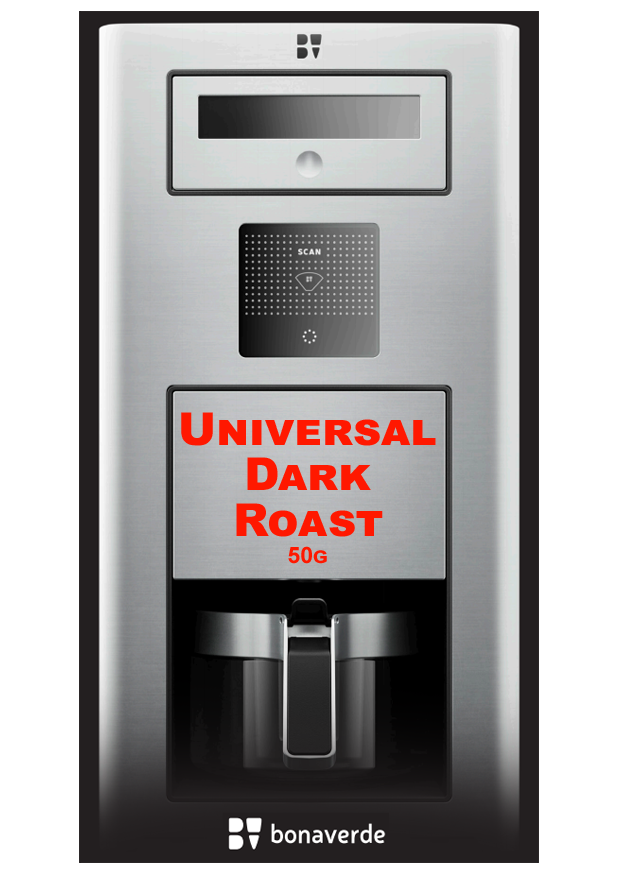
<style>
.page{position:relative;width:620px;height:876px;background:#ffffff}
.page>*{position:absolute;margin:0}
.t1{font:45.4px/45.4px "Arial-Black";color:#ff1800;font-variant:small-caps}
.t2{font:22.7px "Arial-BoldMT";color:#ff1800;font-variant:small-caps}
</style>
<div class="page">
<p class="t1" style="left:181px;top:412px;width:255px;height:152px;text-align:center">Universal<br>Dark<br>Roast<br><span class="t2">50g</span></p>
</div>
